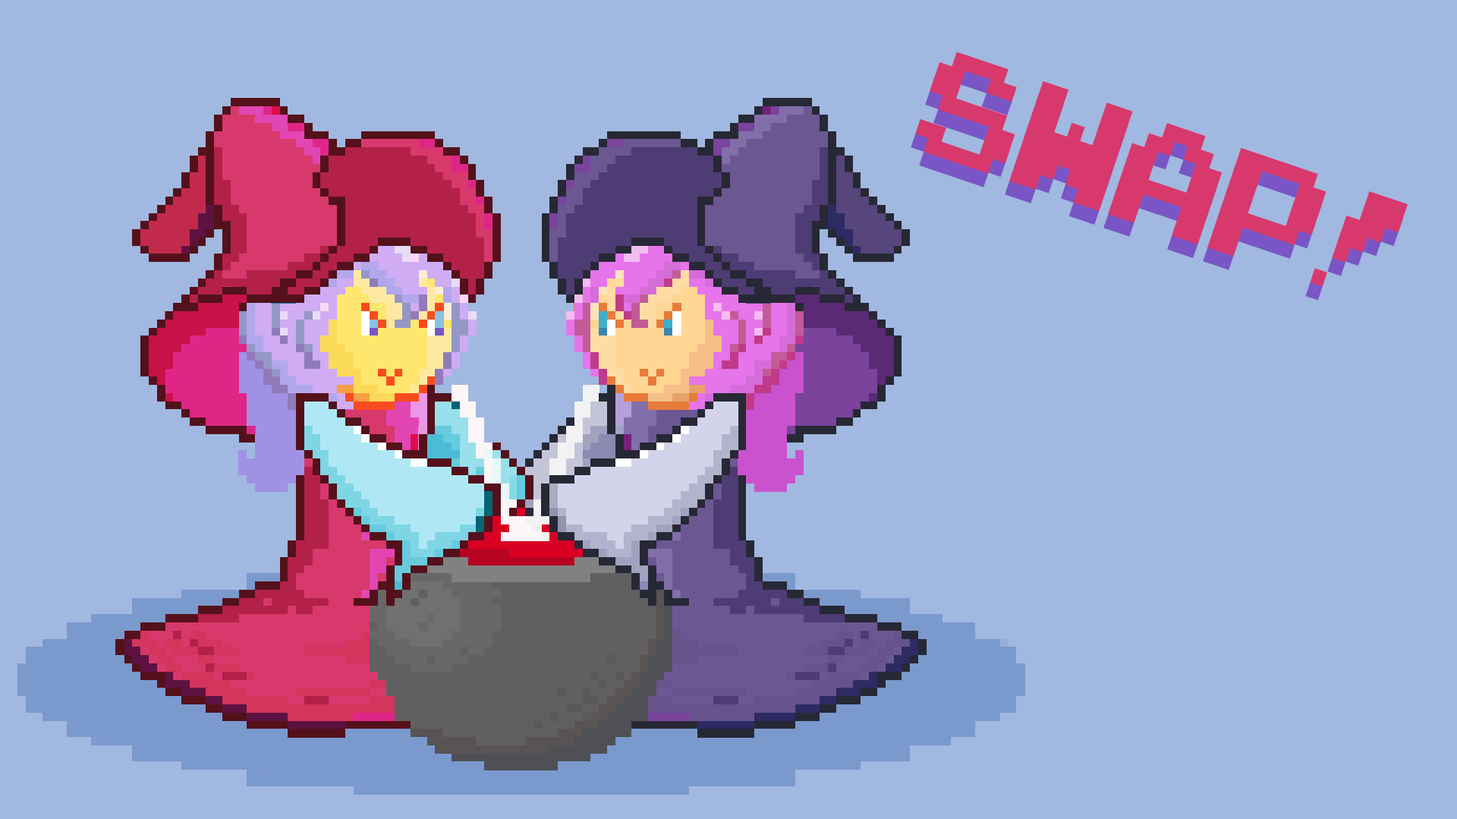
<style>
.page{position:relative;width:1457px;height:819px;background:#a1b8e0}
.page>*{position:absolute;margin:0}
.t1{font:210.9px "ArcadeClassic";color:#d7396c;scale:0.9 1}
.t2{font:210.9px "ArcadeClassic";scale:0.9 1}
</style>
<div class="page">
<p class="t1" style="left:915px;top:52px;width:493px;height:235px;rotate:19deg">SWAP!</p>
<p class="t2" style="left:910px;top:65px;width:494px;height:235px;rotate:19deg">SWAP!</p>
</div>
